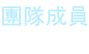
<style>
.page{position:relative;width:89px;height:54px;background:#ffffff}
.page>*{position:absolute;margin:0}
.t1{font:22.3px "MS-Gothic";color:#b8ecff}
</style>
<div class="page">
<p class="t1" style="left:2px;top:5px;width:86px;height:22px">團隊成員</p>
</div>
